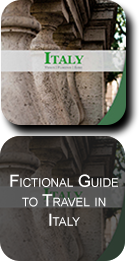
<style>
.page{position:relative;width:139px;height:271px}
.page>*{position:absolute;margin:0}
.t1{font:16.7px/19.4px "ArialMT";color:#ffffff;font-variant:small-caps}
</style>
<div class="page">
<p class="t1" style="left:10px;top:174px;width:108px;height:52px;text-align:center">Fictional Guide to Travel in Italy</p>
</div>
